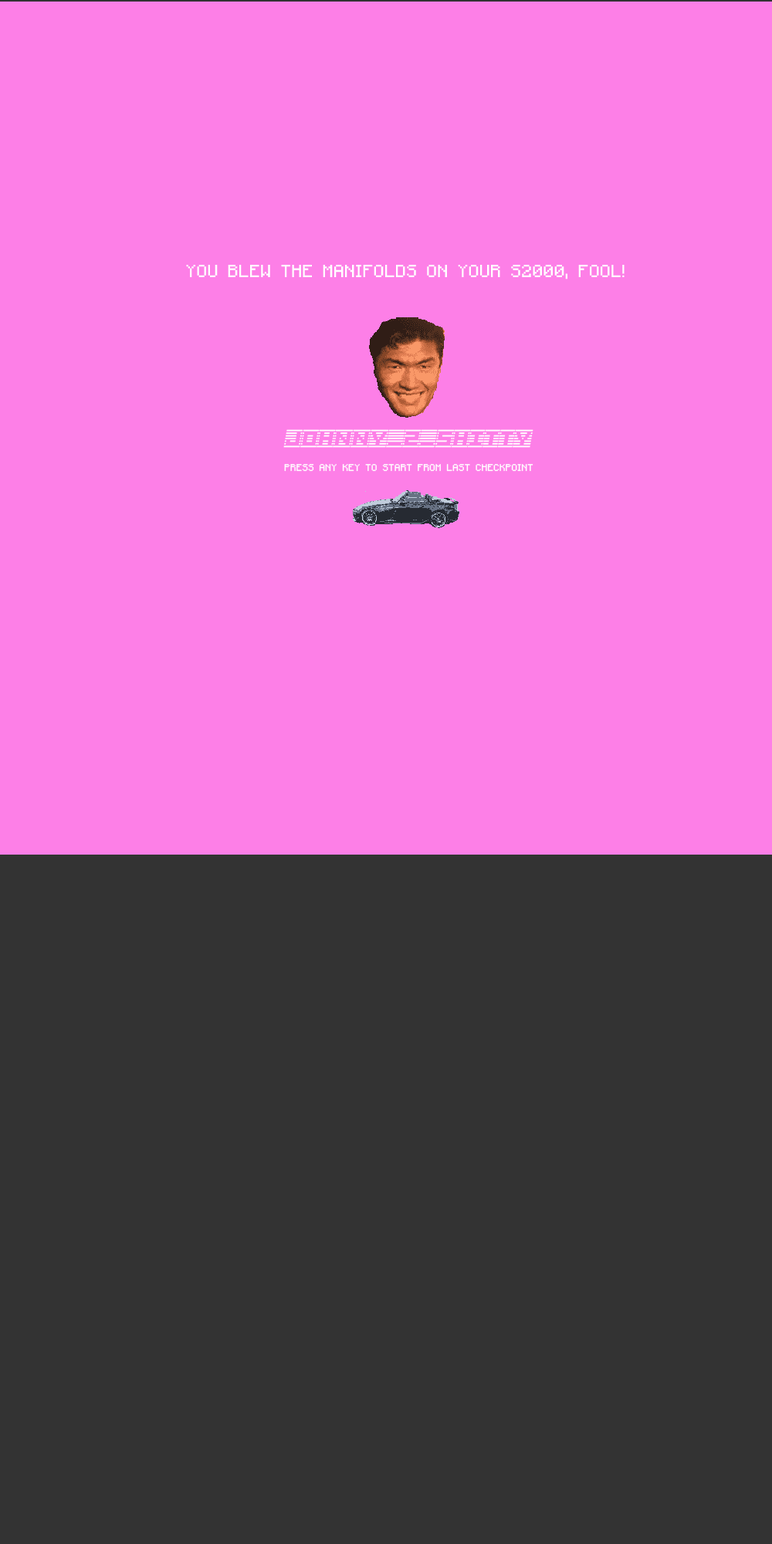
<style>
.page{position:relative;width:772px;height:1544px;background:#fd7fe7}
.page>*{position:absolute;margin:0}
.t1{font:14.1px "Minecraftia";letter-spacing:0.025em;color:#ffffff}
.t2{font:18.5px "Border7alp";letter-spacing:0.025em;color:#ffffff;font-style:italic}
.t3{font:7.7px "Minecraftia";letter-spacing:0.025em;color:#ffffff}
</style>
<div class="page">
<p class="t1" style="left:186px;top:265px;width:439px;height:15px">YOU BLEW THE MANIFOLDS ON YOUR S2000, FOOL!</p>
<p class="t2" style="left:283px;top:429px;width:251px;height:19px">JOHNNY_2_SHITTY</p>
<p class="t3" style="left:284px;top:464px;width:250px;height:8px">PRESS ANY KEY TO START FROM LAST CHECKPOINT</p>
</div>
